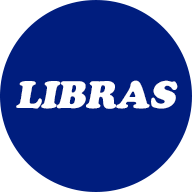
<style>
.page{position:relative;width:192px;height:192px;background:#001d7e}
.page>*{position:absolute;margin:0}
.t1{font:40px "CooperBlack";color:#ffffff;font-style:italic}
</style>
<div class="page">
<p class="t1" style="left:16px;top:80px;width:162px;height:29px">LIBRAS</p>
</div>
